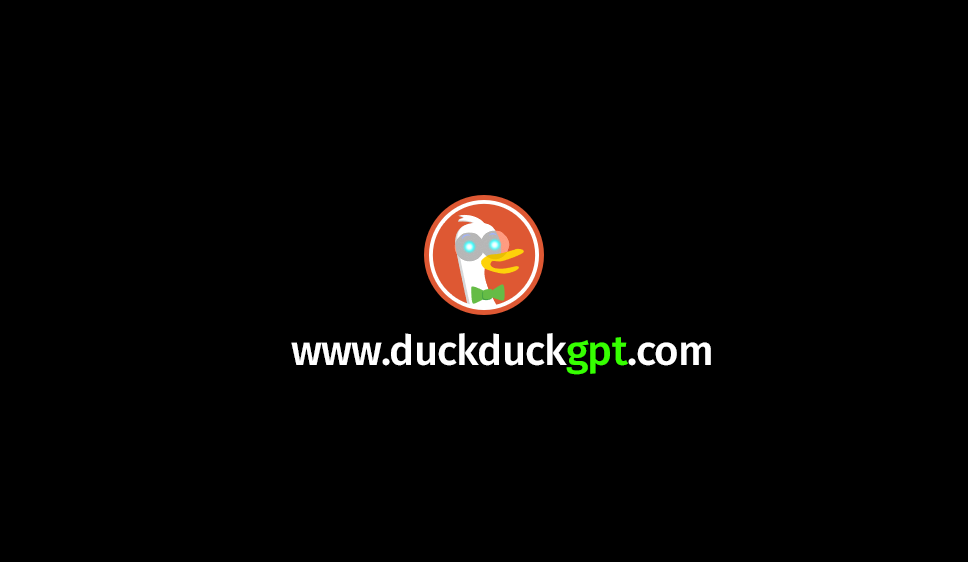
<style>
.page{position:relative;width:968px;height:562px;background:#000000}
.page>*{position:absolute;margin:0}
.t1{font:42px "FiraSans-Medium";letter-spacing:-0.02em;color:#ffffff}
.t2{font:42px "FiraSans-Medium";letter-spacing:-0.02em;color:#36ff00}
</style>
<div class="page">
<p class="t1" style="left:291px;top:333px;width:420px;height:42px">www.duckduck<span class="t2">gpt</span>.com</p>
</div>
